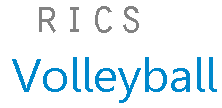
<style>
.page{position:relative;width:222px;height:108px;background:#ffffff}
.page>*{position:absolute;margin:0}
.t1{font:47.3px "OratorStd";color:#828282}
.t2{font:47.3px "Leelawadee";color:#0088cc}
</style>
<div class="page">
<p class="t1" style="left:39px;top:6px;width:100px;height:27px">rics</p>
<p class="t2" style="left:12px;top:57px;width:205px;height:46px">Volleyball</p>
</div>
